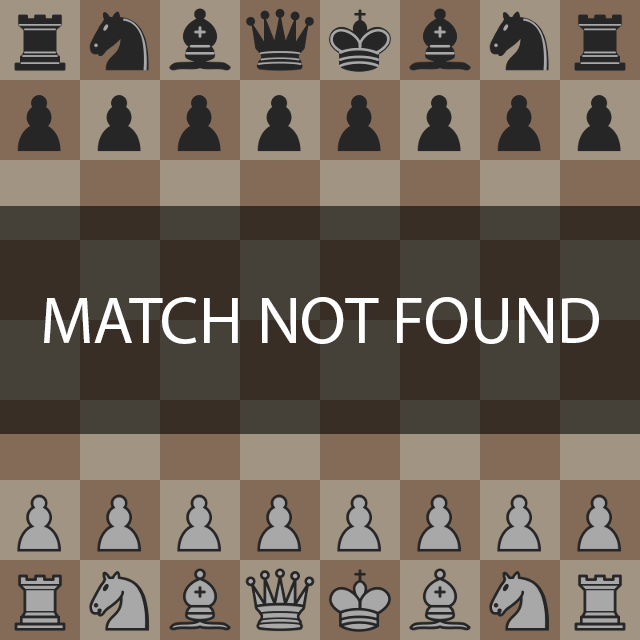
<style>
.page{position:relative;width:640px;height:640px;background:#836b58}
.page>*{position:absolute;margin:0}
.t1{font:66.7px "MyriadPro-Regular";color:#ffffff}
</style>
<div class="page">
<p class="t1" style="left:44px;top:297px;width:555px;height:47px">MATCH NOT FOUND</p>
</div>
